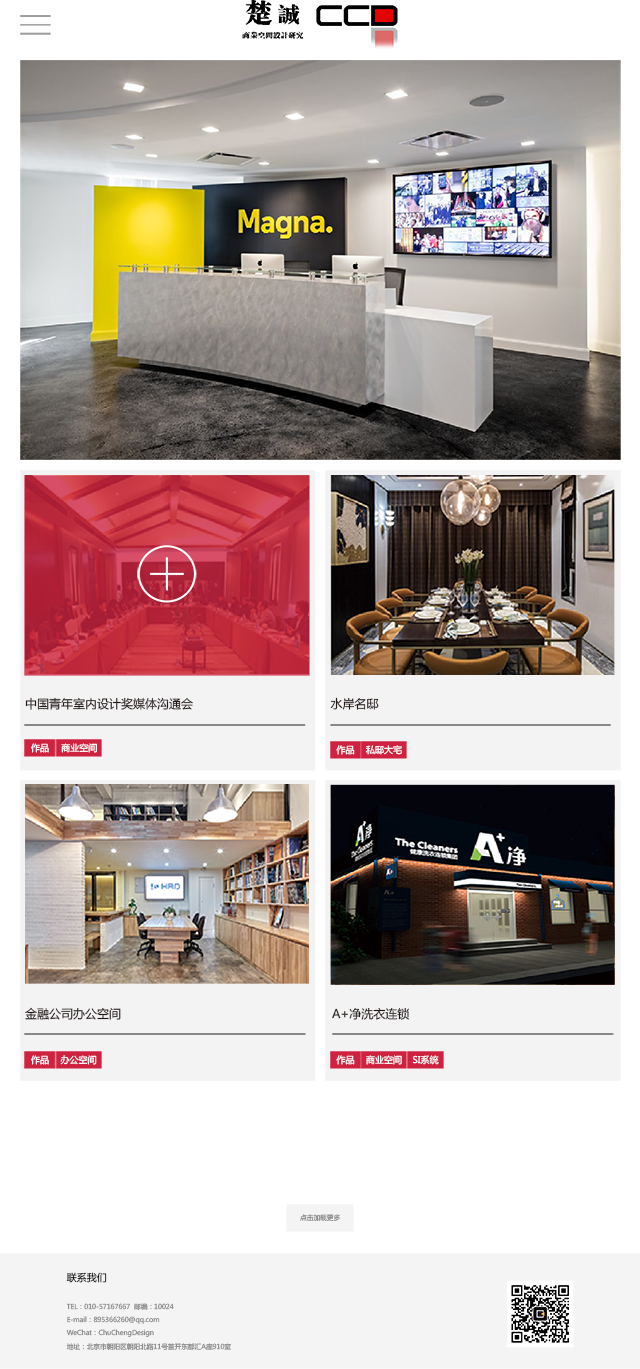
<style>
.page{position:relative;width:640px;height:1369px;background:#ffffff}
.page>*{position:absolute;margin:0}
.t1{font:12px "MicrosoftYaHei";color:#231815}
.t2{font:9px "MicrosoftYaHei";color:#ffffff}
.t3{font:6.7px "MicrosoftYaHei";color:#878787}
.t4{font:6.7px/13.3px "MicrosoftYaHei";color:#878787}
.t5{font:10px/14.7px "MicrosoftYaHei";color:#000000}
</style>
<div class="page">
<p class="t1" style="left:25px;top:697px;width:168px;height:13px">中国青年室内设计奖媒体沟通会</p>
<p class="t1" style="left:330px;top:697px;width:49px;height:13px">水岸名邸</p>
<p class="t2" style="left:31px;top:743px;width:18px;height:10px">作品</p>
<p class="t2" style="left:61px;top:743px;width:36px;height:10px">商业空间</p>
<p class="t2" style="left:336px;top:745px;width:19px;height:10px">作品</p>
<p class="t2" style="left:366px;top:745px;width:36px;height:10px">私邸大宅</p>
<p class="t1" style="left:25px;top:1007px;width:96px;height:13px">金融公司办公空间</p>
<p class="t1" style="left:332px;top:1007px;width:77px;height:13px">A+净洗衣连锁</p>
<p class="t2" style="left:31px;top:1055px;width:18px;height:10px">作品</p>
<p class="t2" style="left:60px;top:1055px;width:37px;height:10px">办公空间</p>
<p class="t2" style="left:336px;top:1055px;width:19px;height:10px">作品</p>
<p class="t2" style="left:366px;top:1055px;width:36px;height:10px">商业空间</p>
<p class="t2" style="left:412px;top:1055px;width:27px;height:10px">SI系统</p>
<p class="t3" style="left:300px;top:1214px;width:40px;height:7px">点击加载更多</p>
<p class="t4" style="left:66px;top:1272px;width:165px;height:79px"><span class="t5">联系我们<br><br></span>TEL：010-57167667  邮编：10024<br>E-mail：895366260@qq.com<br>WeChat：ChuChengDesign<br>地址：北京市朝阳区朝阳北路11号首开东都汇A座910室</p>
</div>
